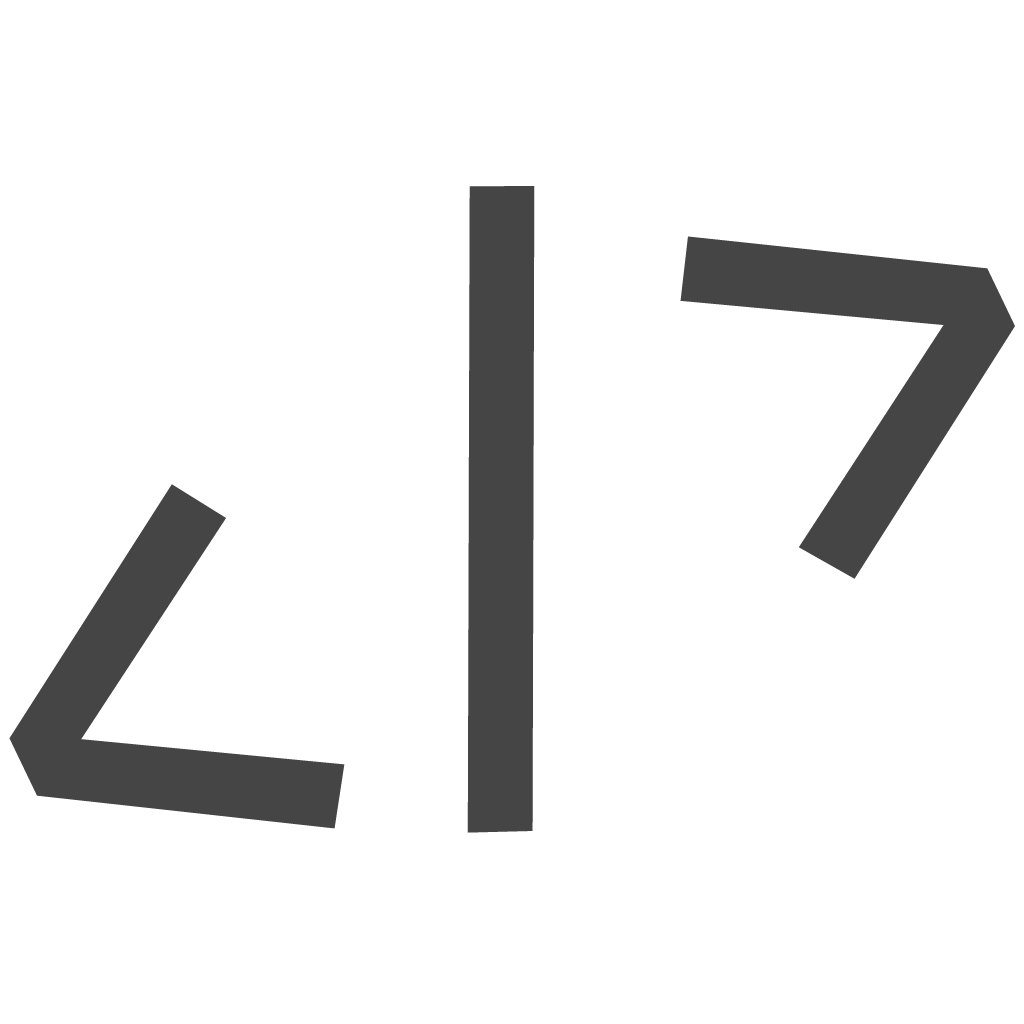
<style>
.page{position:relative;width:1024px;height:1024px;background:#ffffff}
.page>*{position:absolute;margin:0}
.t1{font:645.4px "FiraCode-Medium";color:#454545}
</style>
<div class="page">
<p class="t1" style="left:9px;top:186px;width:1006px;height:647px;rotate:-26deg">&lt;/&gt;</p>
</div>
